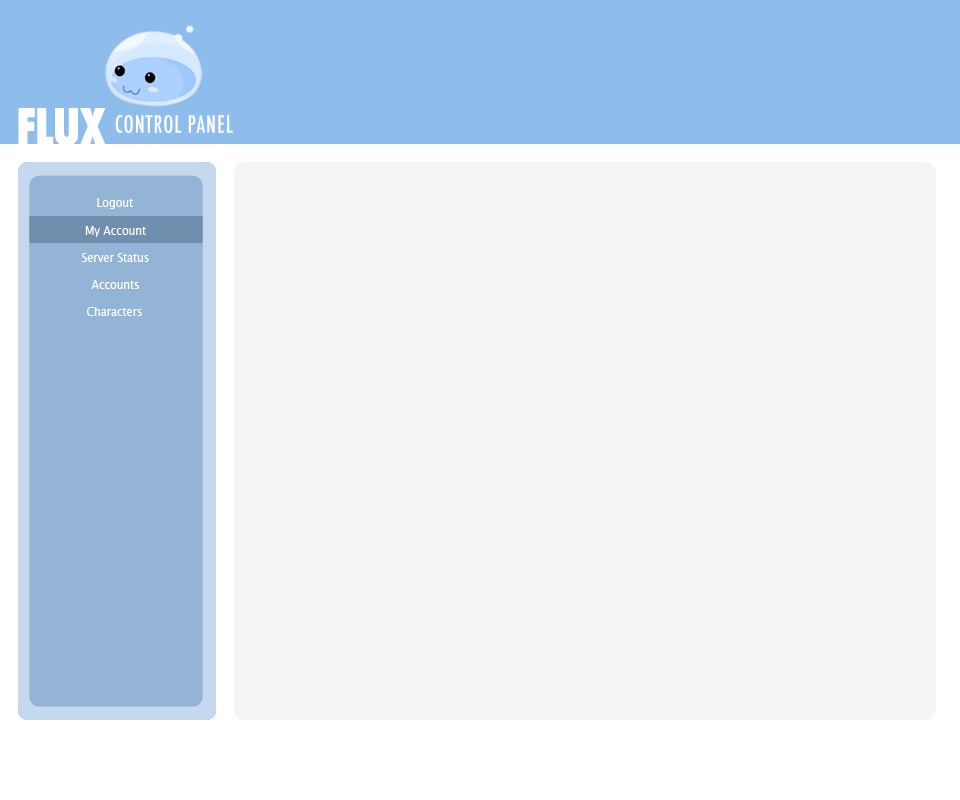
<style>
.page{position:relative;width:960px;height:800px;background:#f5f5f5}
.page>*{position:absolute;margin:0}
.t1{font:40px "Futura-CondensedMedium";letter-spacing:0.05em;color:#ffffff;font-variant:small-caps;scale:0.9 1}
.t2{font:72px "Futura-CondensedExtraBold";letter-spacing:-0.025em;color:#ffffff;font-variant:small-caps;scale:0.9 1}
.t3{font:12px "LucidaGrande";color:#ffffff;scale:0.9 1}
.t4{font:12px "LucidaGrande";scale:0.9 1}
</style>
<div class="page">
<p class="t1" style="left:18px;top:108px;width:215px;height:38px"><span class="t2">flux </span>CONTROL PANEL</p>
<p class="t3" style="left:97px;top:198px;width:36px;height:11px">Logout</p>
<p class="t4" style="left:97px;top:199px;width:36px;height:11px">Logout</p>
<p class="t3" style="left:85px;top:226px;width:61px;height:11px">My Account</p>
<p class="t3" style="left:85px;top:226px;width:61px;height:11px">My Account</p>
<p class="t3" style="left:81px;top:253px;width:68px;height:9px">Server Status</p>
<p class="t3" style="left:81px;top:253px;width:68px;height:9px">Server Status</p>
<p class="t3" style="left:91px;top:280px;width:48px;height:9px">Accounts</p>
<p class="t3" style="left:91px;top:280px;width:48px;height:9px">Accounts</p>
<p class="t3" style="left:87px;top:307px;width:55px;height:9px">Characters</p>
<p class="t3" style="left:87px;top:307px;width:55px;height:9px">Characters</p>
</div>
